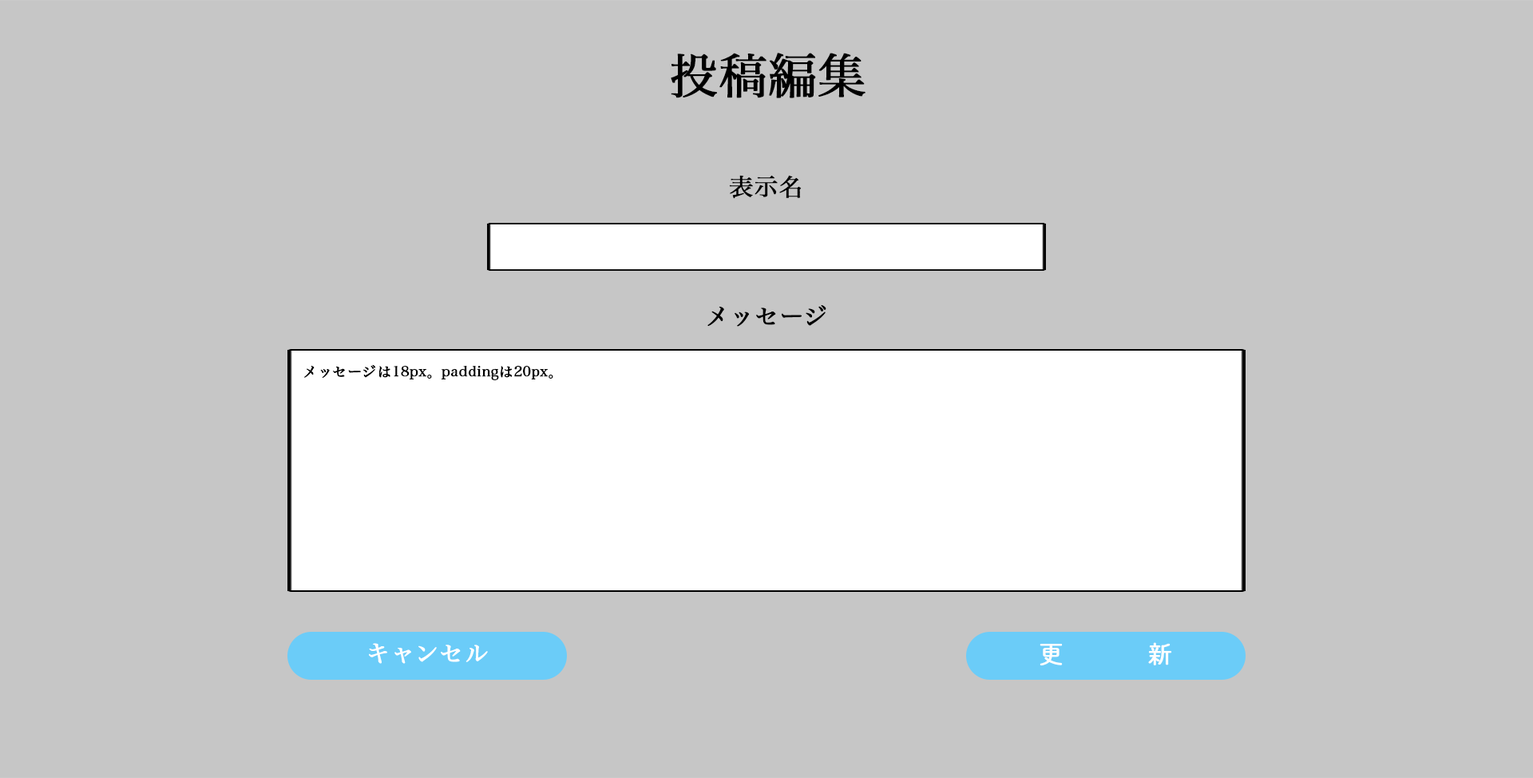
<style>
.page{position:relative;width:1533px;height:778px;background:#c6c6c6}
.page>*{position:absolute;margin:0}
.t1{font:47.9px "HiraMinPro-W3";color:#000000;font-weight:bold}
.t2{font:24px "HiraMinPro-W3";color:#000000;font-weight:bold}
.t3{font:14.4px "HiraMinPro-W3";color:#000000;font-weight:bold}
.t4{font:24px "HiraMinPro-W3";color:#ffffff;font-weight:bold}
.t5{font:24px "DNPShueiMGoStd-L";color:#fefefe;font-weight:bold}
</style>
<div class="page">
<p class="t1" style="left:671px;top:53px;width:195px;height:45px">投稿編集</p>
<p class="t2" style="left:729px;top:175px;width:73px;height:24px">表示名</p>
<p class="t2" style="left:707px;top:305px;width:119px;height:22px">メッセージ</p>
<p class="t3" style="left:304px;top:364px;width:249px;height:16px">メッセージは18px。paddingは20px。</p>
<p class="t4" style="left:369px;top:643px;width:119px;height:21px">キャンセル</p>
<p class="t5" style="left:1040px;top:642px;width:132px;height:24px">更新</p>
</div>
